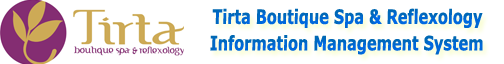
<style>
.page{position:relative;width:504px;height:64px;background:#ffffff}
.page>*{position:absolute;margin:0}
.t1{font:19.8px "Verdana-Bold";color:#0068d1;scale:0.73 1}
</style>
<div class="page">
<p class="t1" style="left:210px;top:8px;width:273px;height:47px;text-align:center">Tirta Boutique Spa &amp; Reflexology<br>Information Management System</p>
</div>
